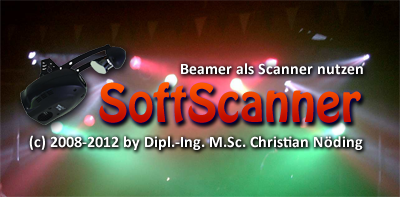
<style>
.page{position:relative;width:400px;height:197px}
.page>*{position:absolute;margin:0}
.t1{font:16px "Calibri-Bold";color:#ffffff}
.t2{font:46.7px "HoboStd"}
</style>
<div class="page">
<p class="t1" style="left:181px;top:63px;width:182px;height:12px">Beamer als Scanner nutzen</p>
<p class="t2" style="left:99px;top:82px;width:262px;height:41px">SoftScanner</p>
<p class="t1" style="left:29px;top:135px;width:334px;height:15px">(c) 2008-2012 by Dipl.-Ing. M.Sc. Christian Nöding</p>
</div>
